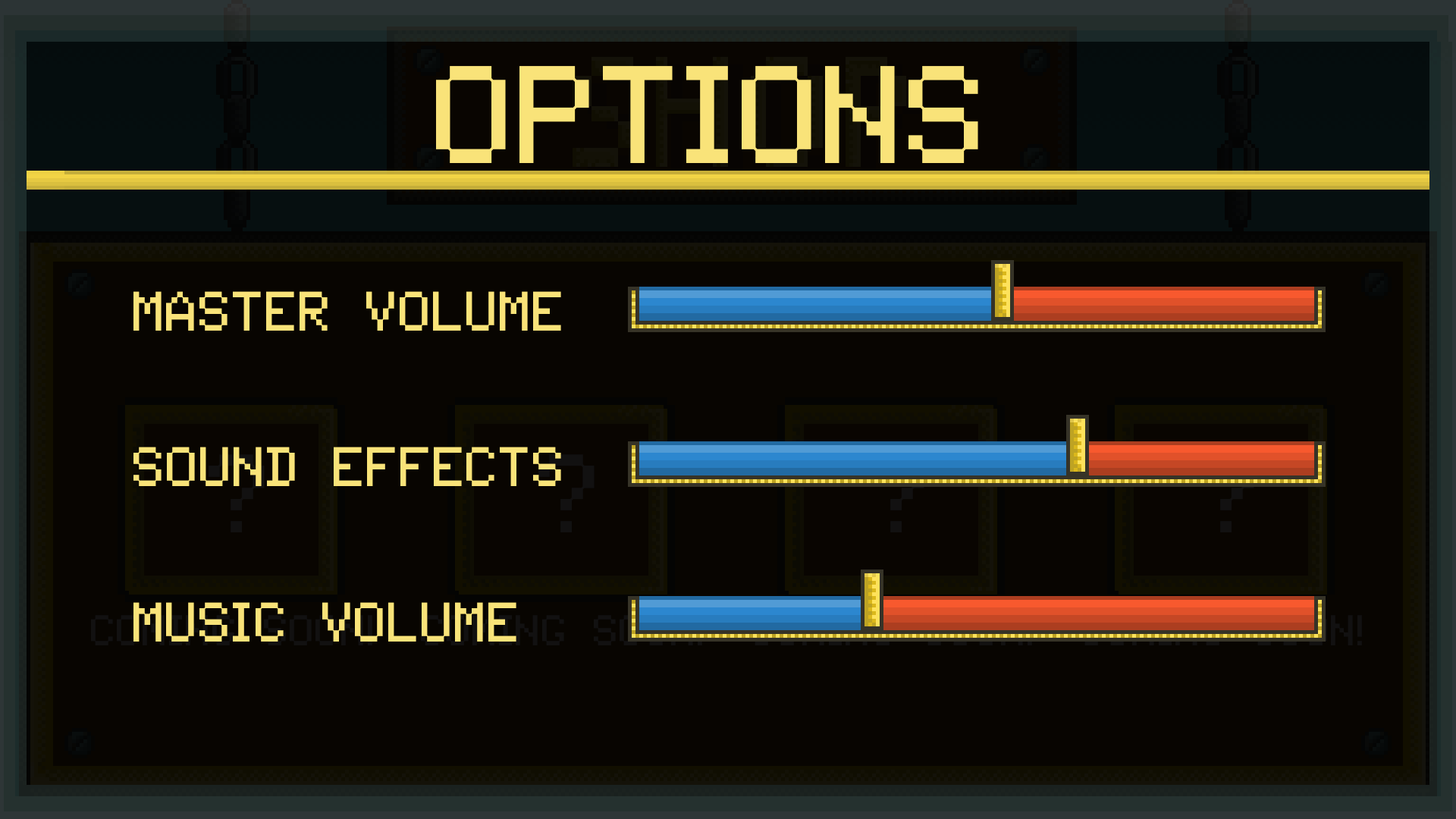
<style>
.page{position:relative;width:1456px;height:819px;background:#080501}
.page>*{position:absolute;margin:0}
.t1{font:142.2px "Tandysoft";color:#f9e379}
.t2{font:56.9px "Tandysoft";color:#f9e379}
</style>
<div class="page">
<p class="t1" style="left:436px;top:66px;width:542px;height:97px">options</p>
<p class="t2" style="left:133px;top:291px;width:428px;height:40px">master volume</p>
<p class="t2" style="left:133px;top:447px;width:428px;height:39px">sound effects</p>
<p class="t2" style="left:133px;top:602px;width:383px;height:40px">music volume</p>
</div>
